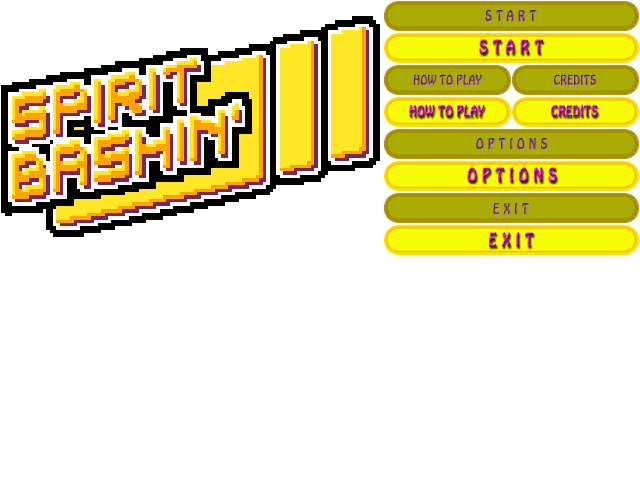
<style>
.page{position:relative;width:640px;height:480px;background:#ffffff}
.page>*{position:absolute;margin:0}
.t1{font:13.8px "HoboStd";letter-spacing:0.36em;scale:0.8 1}
.t2{font:17.2px "HoboStd";letter-spacing:0.36em;scale:0.8 1}
.t3{font:12.5px "HoboStd";letter-spacing:0.02em;scale:0.8 1}
.t4{font:13.8px "HoboStd";letter-spacing:0.02em;scale:0.8 1}
</style>
<div class="page">
<p class="t1" style="left:485px;top:10px;width:52px;height:12px">START</p>
<p class="t2" style="left:479px;top:39px;width:65px;height:15px">START</p>
<p class="t3" style="left:413px;top:74px;width:69px;height:12px">HOW TO PLAY</p>
<p class="t3" style="left:554px;top:74px;width:43px;height:12px">CREDITS</p>
<p class="t4" style="left:409px;top:104px;width:76px;height:13px">HOW TO PLAY</p>
<p class="t4" style="left:550px;top:104px;width:48px;height:13px">CREDITS</p>
<p class="t1" style="left:476px;top:138px;width:72px;height:12px">OPTIONS</p>
<p class="t2" style="left:467px;top:167px;width:90px;height:15px">OPTIONS</p>
<p class="t1" style="left:493px;top:203px;width:36px;height:12px">EXIT</p>
<p class="t2" style="left:489px;top:232px;width:45px;height:15px">EXIT</p>
</div>
